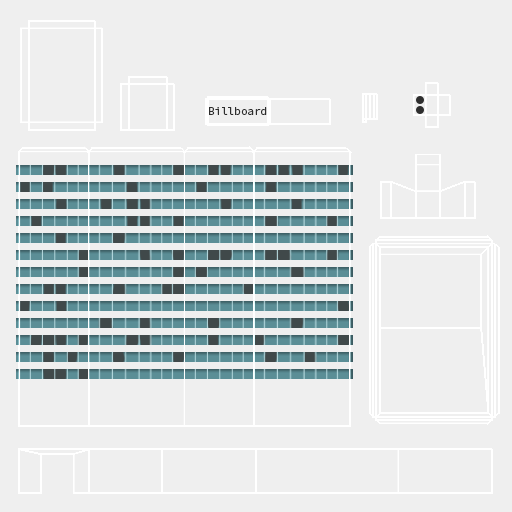
<style>
.page{position:relative;width:512px;height:512px;background:#efefef}
.page>*{position:absolute;margin:0}
.t1{font:11px "SourceCodePro-Regular";color:#2d2d2d}
</style>
<div class="page">
<p class="t1" style="left:209px;top:107px;width:58px;height:8px">Billboard</p>
</div>
